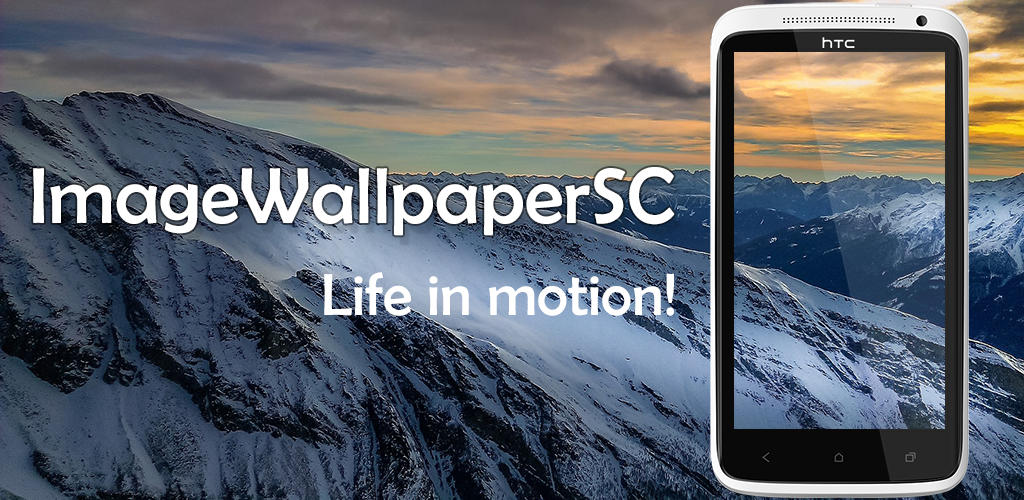
<style>
.page{position:relative;width:1024px;height:500px}
.page>*{position:absolute;margin:0}
.t1{font:80px "BerlinSansFB-Reg";color:#ffffff}
.t2{font:60px "BerlinSansFB-Reg";color:#ffffff}
</style>
<div class="page">
<p class="t1" style="left:33px;top:167px;width:642px;height:69px">ImageWallpaperSC</p>
<p class="t2" style="left:324px;top:272px;width:350px;height:44px">Life in motion!</p>
</div>
